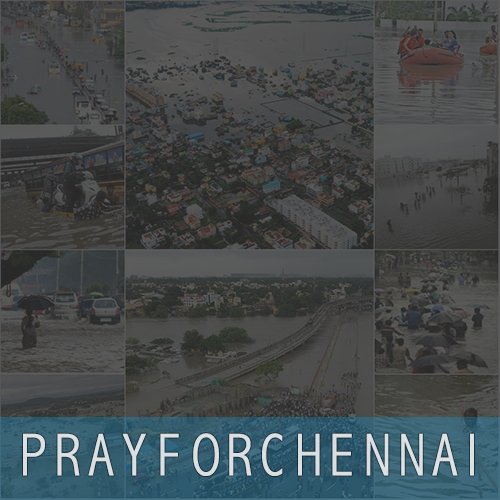
<style>
.page{position:relative;width:500px;height:500px}
.page>*{position:absolute;margin:0}
.t1{font:61px "AbadiMT-CondensedLight";color:#dbdfe3;font-weight:bold;scale:0.93 1}
</style>
<div class="page">
<p class="t1" style="left:23px;top:433px;width:451px;height:43px">PRAY FORCHENNAI</p>
</div>
